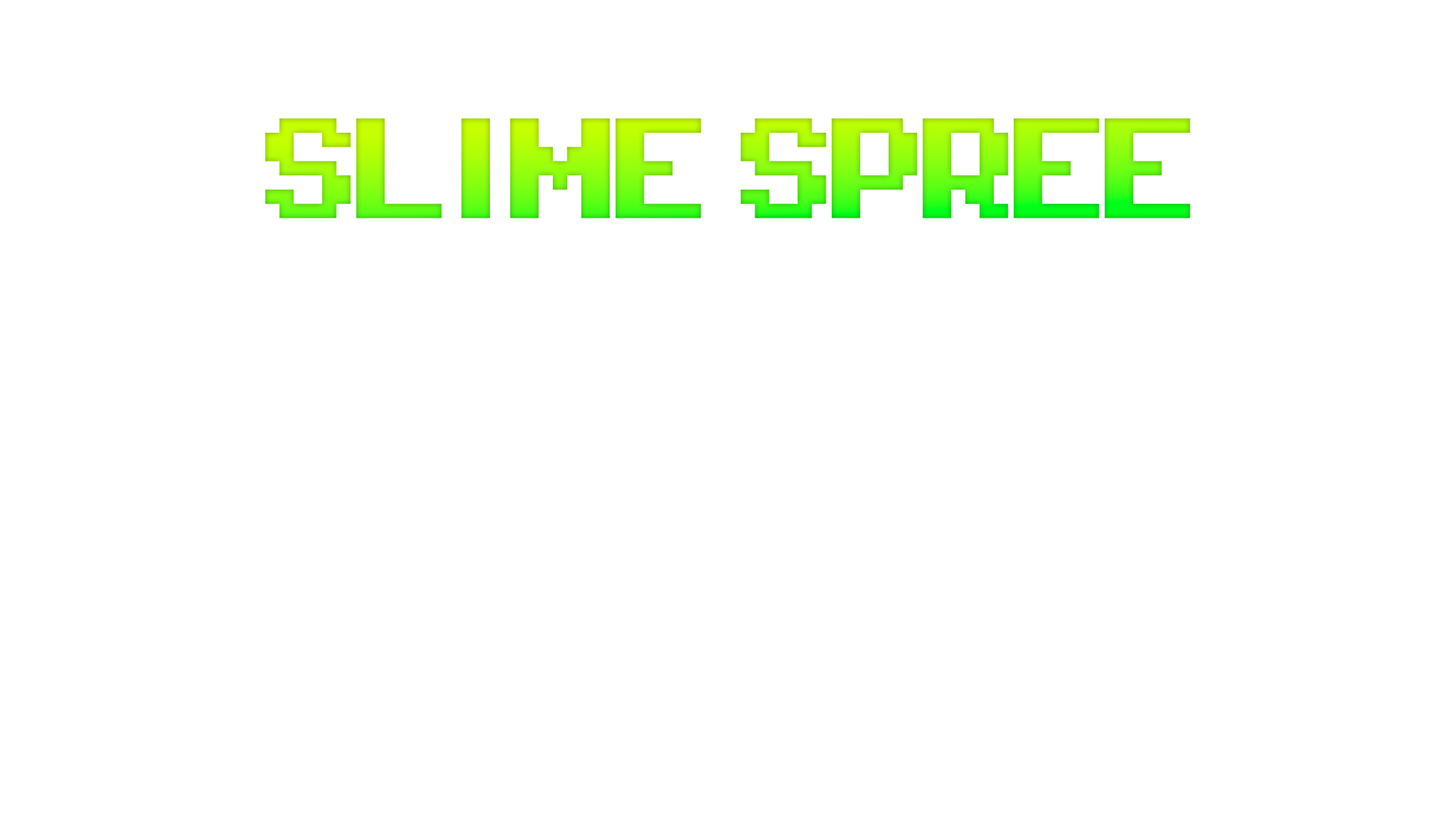
<style>
.page{position:relative;width:1456px;height:819px;background:#ffffff}
.page>*{position:absolute;margin:0}
.t1{font:113.7px "PixelOperator8-Bold";letter-spacing:-0.2em}
</style>
<div class="page">
<p class="t1" style="left:265px;top:118px;width:926px;height:100px">SLIME SPREE</p>
</div>
